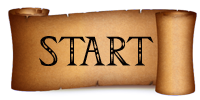
<style>
.page{position:relative;width:200px;height:100px;background:#ffffff}
.page>*{position:absolute;margin:0}
.t1{font:33.3px "Triforce";color:#050202}
</style>
<div class="page">
<p class="t1" style="left:39px;top:36px;width:115px;height:30px">START</p>
</div>
